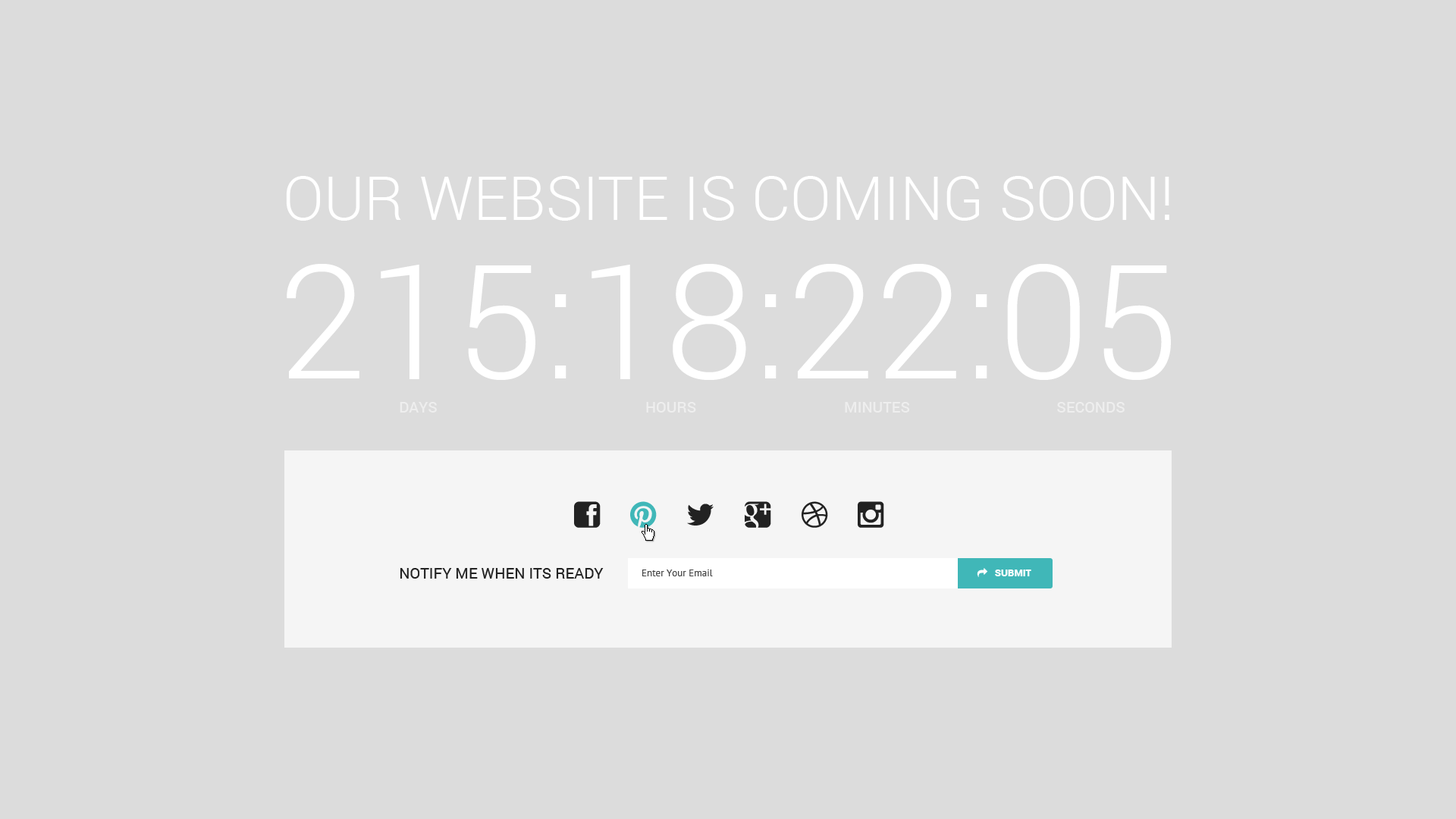
<style>
.page{position:relative;width:1456px;height:819px;background:#dcdcdc}
.page>*{position:absolute;margin:0}
.t1{font:60.7px "Roboto-Light";color:#ffffff;text-transform:uppercase}
.t2{font:159.2px "Roboto-Light";color:#ffffff;text-transform:uppercase}
.t3{font:15.2px "Roboto-Medium";color:#ffffff;text-transform:uppercase}
.t4{font:15.2px "Roboto-Regular";color:#222222;text-transform:uppercase}
.t5{font:9.9px "PTSans-Regular";color:#444444}
</style>
<div class="page">
<p class="t1" style="left:286px;top:176px;width:883px;height:45px">OUR WEBSITE IS COMING SOON!</p>
<p class="t2" style="left:287px;top:264px;width:884px;height:116px">215:18:22:05</p>
<p class="t3" style="left:400px;top:402px;width:37px;height:11px;opacity:0.5">days</p>
<p class="t3" style="left:646px;top:402px;width:50px;height:11px;opacity:0.5">Hours</p>
<p class="t3" style="left:845px;top:402px;width:65px;height:11px;opacity:0.5">Minutes</p>
<p class="t3" style="left:1057px;top:402px;width:68px;height:11px;opacity:0.5">Seconds</p>
<p class="t4" style="left:400px;top:568px;width:204px;height:11px">NOTIFY ME WHEN ITS READY</p>
<p class="t5" style="left:642px;top:570px;width:71px;height:6px">Enter Your Email</p>
</div>
